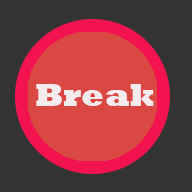
<style>
.page{position:relative;width:192px;height:192px;background:#333333}
.page>*{position:absolute;margin:0}
.t1{font:33.3px "Rockwell-ExtraBold";color:#f5eaed}
</style>
<div class="page">
<p class="t1" style="left:36px;top:84px;width:118px;height:22px">Break</p>
</div>
